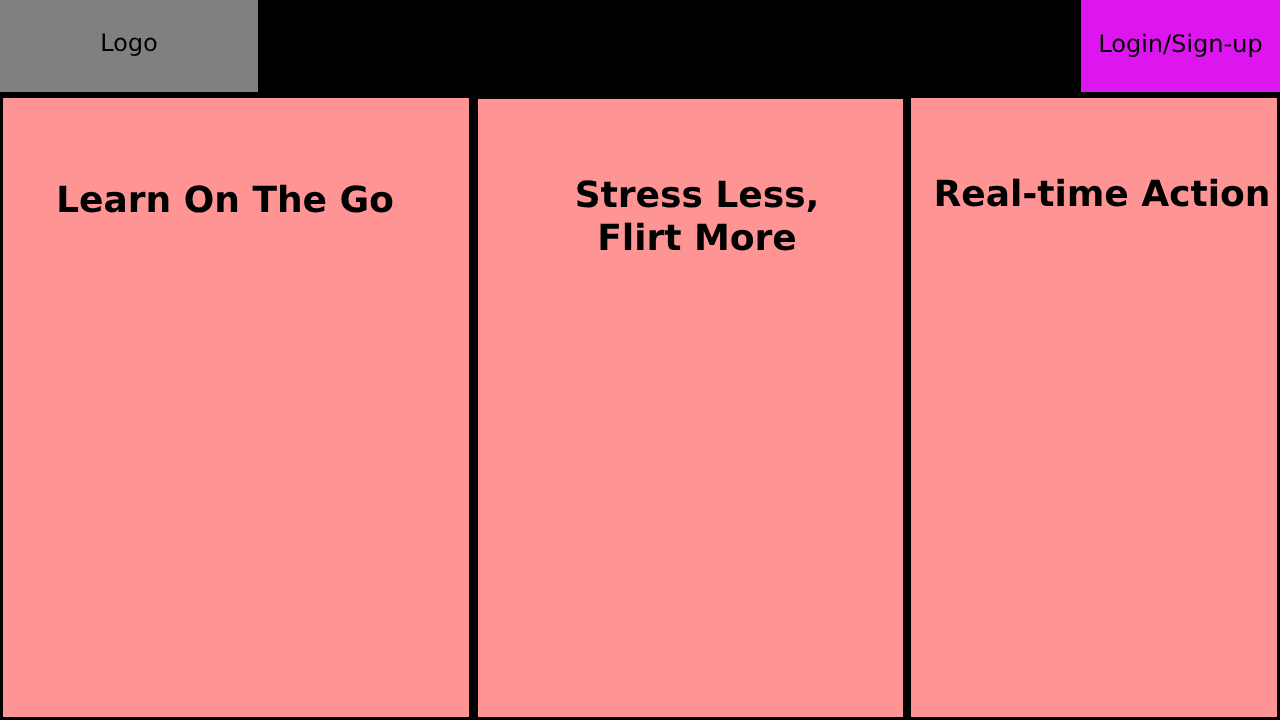
<style>
.page{position:relative;width:1280px;height:720px;background:#ff9494}
.page>*{position:absolute;margin:0}
.t1{font:24px "DejaVuSans";color:#000000}
.t2{font:36px "DejaVuSans-Bold";color:#000000}
</style>
<div class="page">
<p class="t1" style="left:102px;top:33px;width:55px;height:23px">Logo</p>
<p class="t1" style="left:1100px;top:33px;width:162px;height:24px">Login/Sign-up</p>
<p class="t2" style="left:59px;top:184px;width:334px;height:29px">Learn On The Go</p>
<p class="t2" style="left:577px;top:180px;width:239px;height:71px;text-align:center">Stress Less,<br>Flirt More</p>
<p class="t2" style="left:936px;top:178px;width:332px;height:29px">Real-time Action</p>
</div>
